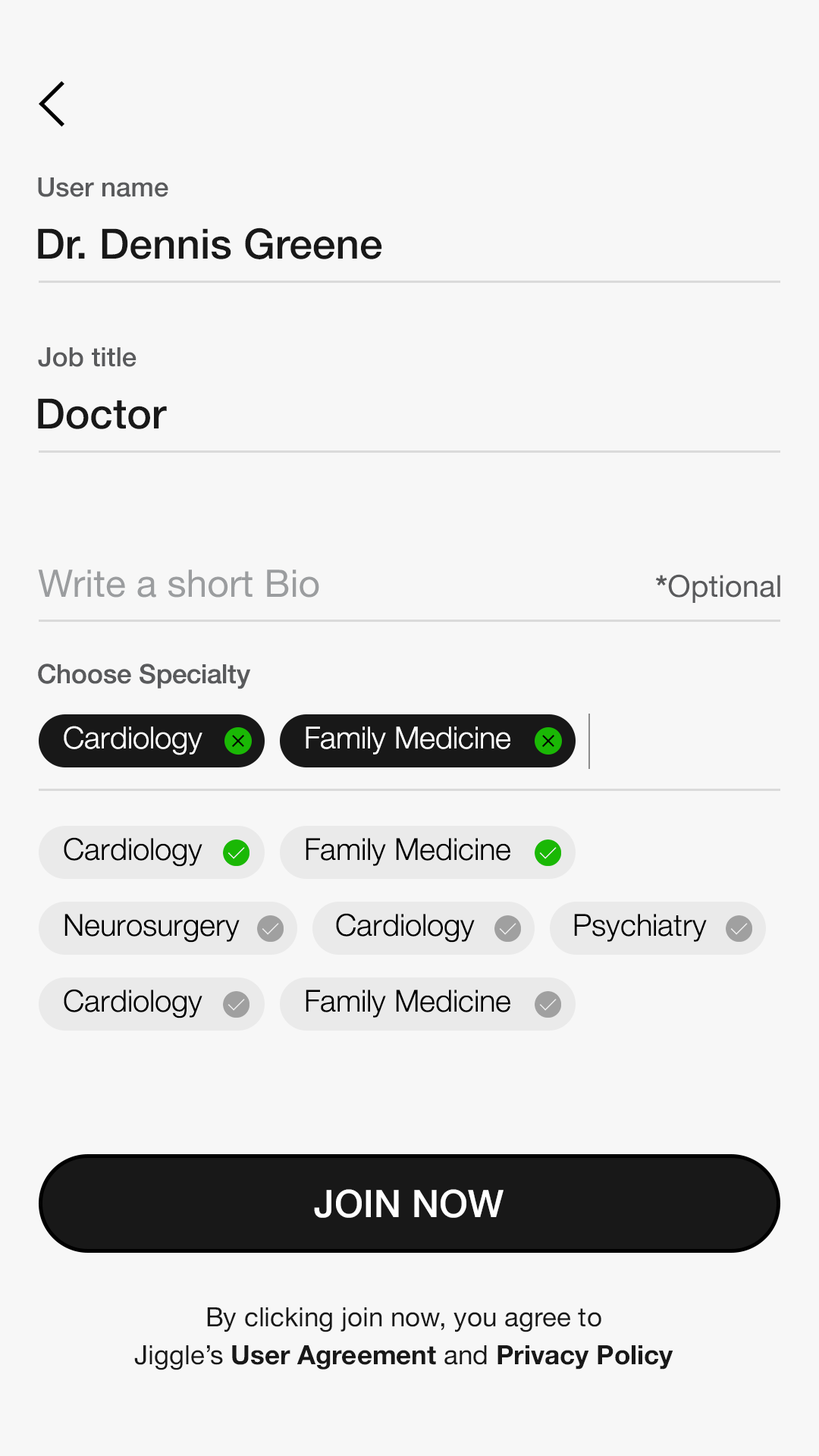
<style>
.page{position:relative;width:819px;height:1456px;background:#f7f7f7}
.page>*{position:absolute;margin:0}
.t1{font:26.5px "HelveticaNeue-Medium";color:#595a5c}
.t2{font:41.7px "HelveticaNeue-Medium";color:#181818}
.t3{font:37.9px "HelveticaNeue";color:#9b9d9f}
.t4{font:30.3px "HelveticaNeue";color:#595a5c}
.t5{font:30.3px "HelveticaNeue-Bold";color:#595a5c}
.t6{font:30.3px "HelveticaNeue-Light";color:#ffffff}
.t7{font:30.3px "HelveticaNeue-Light";color:#000000}
.t8{font:37.9px "HelveticaNeue-Medium";color:#ffffff}
.t9{font:26.5px/37.9px "HelveticaNeue";color:#181818}
.t10{font:26.5px/37.9px "HelveticaNeue-Bold";color:#181818}
</style>
<div class="page">
<p class="t1" style="left:38px;top:177px;width:130px;height:20px">User name</p>
<p class="t2" style="left:38px;top:227px;width:344px;height:32px">Dr. Dennis Greene</p>
<p class="t1" style="left:38px;top:347px;width:98px;height:20px">Job title</p>
<p class="t2" style="left:38px;top:398px;width:129px;height:31px">Doctor</p>
<p class="t3" style="left:38px;top:570px;width:281px;height:28px">Write a short Bio</p>
<p class="t4" style="left:656px;top:574px;width:124px;height:29px"><span class="t5">*</span>Optional</p>
<p class="t1" style="left:38px;top:664px;width:213px;height:25px">Choose Specialty</p>
<p class="t6" style="left:64px;top:726px;width:138px;height:29px">Cardiology</p>
<p class="t6" style="left:306px;top:726px;width:204px;height:29px">Family Medicine</p>
<p class="t7" style="left:64px;top:837px;width:138px;height:30px">Cardiology</p>
<p class="t7" style="left:306px;top:838px;width:204px;height:28px">Family Medicine</p>
<p class="t7" style="left:64px;top:914px;width:176px;height:29px">Neurosurgery</p>
<p class="t7" style="left:336px;top:913px;width:139px;height:30px">Cardiology</p>
<p class="t7" style="left:574px;top:914px;width:133px;height:28px">Psychiatry</p>
<p class="t7" style="left:64px;top:989px;width:138px;height:29px">Cardiology</p>
<p class="t7" style="left:306px;top:990px;width:204px;height:28px">Family Medicine</p>
<p class="t8" style="left:314px;top:1189px;width:190px;height:29px">JOIN NOW</p>
<p class="t9" style="left:134px;top:1307px;width:539px;height:63px;text-align:center">By clicking join now, you agree to<br>Jiggle’s <span class="t10">User Agreement </span>and <span class="t10">Privacy Policy</span></p>
</div>
